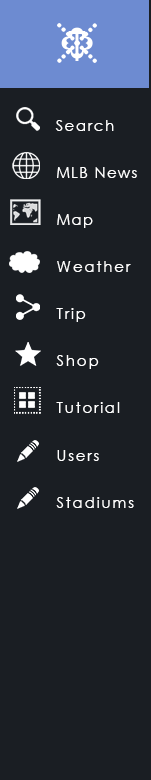
<style>
.page{position:relative;width:151px;height:780px;background:#1a1e23}
.page>*{position:absolute;margin:0}
.t1{font:10px "CenturyGothic";letter-spacing:0.1em;color:#ffffff}
.t2{font:15px "CenturyGothic";letter-spacing:0.1em;color:#ffffff}
.t3{font:14.6px "CenturyGothic";letter-spacing:0.1em;color:#ffffff}
.t4{font:15.5px "CenturyGothic";letter-spacing:0.1em;color:#ffffff}
</style>
<div class="page">
<p class="t1" style="left:68px;top:31px;width:18px;height:30px">T</p>
<p class="t2" style="left:55px;top:120px;width:59px;height:11px">Search</p>
<p class="t3" style="left:57px;top:167px;width:80px;height:11px">MLB News</p>
<p class="t3" style="left:57px;top:214px;width:36px;height:14px">Map</p>
<p class="t4" style="left:57px;top:261px;width:74px;height:11px">Weather</p>
<p class="t4" style="left:56px;top:308px;width:30px;height:14px">Trip</p>
<p class="t4" style="left:56px;top:355px;width:43px;height:14px">Shop</p>
<p class="t4" style="left:56px;top:402px;width:64px;height:11px">Tutorial</p>
<p class="t4" style="left:57px;top:450px;width:42px;height:11px">Users</p>
<p class="t4" style="left:56px;top:497px;width:78px;height:11px">Stadiums</p>
</div>
